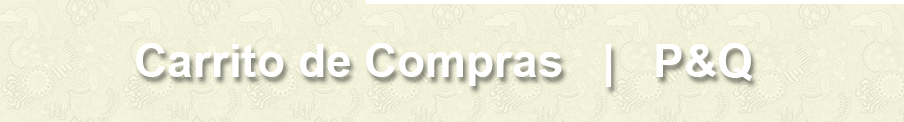
<style>
.page{position:relative;width:904px;height:122px}
.page>*{position:absolute;margin:0}
.t1{font:46px "Arial-BoldMT";color:#ffffff}
</style>
<div class="page">
<p class="t1" style="left:136px;top:43px;width:616px;height:44px">Carrito de Compras   |   P&amp;Q</p>
</div>
